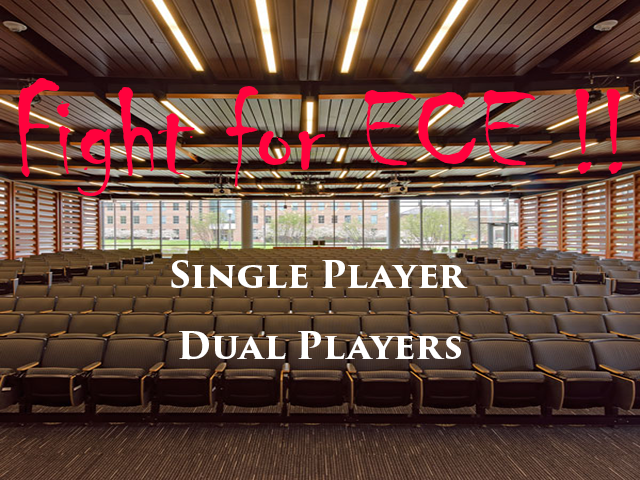
<style>
.page{position:relative;width:640px;height:480px}
.page>*{position:absolute;margin:0}
.t1{font:125px "Chiller-Regular";color:#ff023d}
.t2{font:36px "TrajanPro3-Bold";color:#ffffff}
</style>
<div class="page">
<p class="t1" style="left:18px;top:78px;width:605px;height:118px">Fight for ECE !!</p>
<p class="t2" style="left:171px;top:260px;width:297px;height:28px">Single Player</p>
<p class="t2" style="left:179px;top:331px;width:282px;height:29px">Dual Players</p>
</div>
